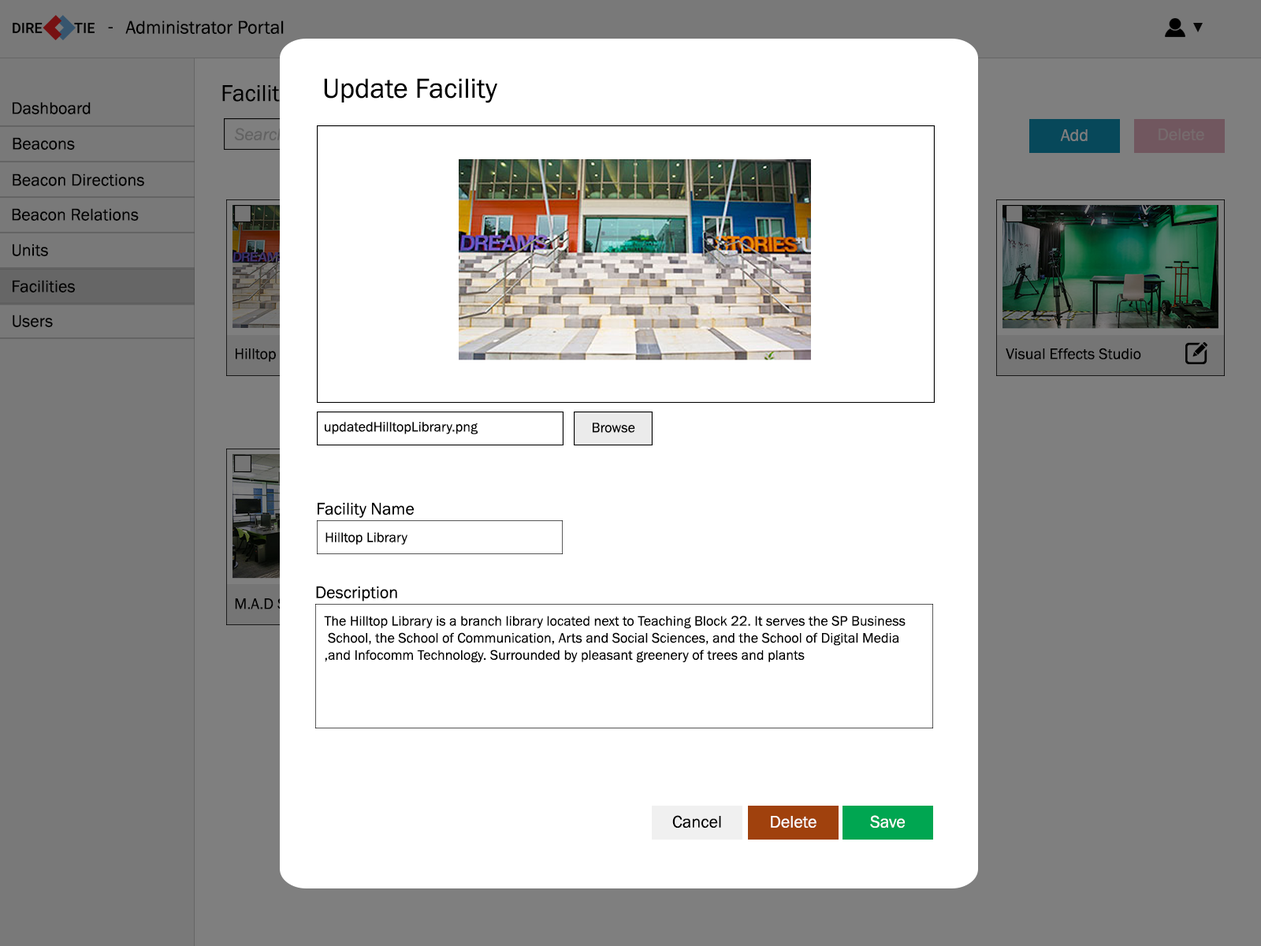
<style>
.page{position:relative;width:1261px;height:946px;background:#ffffff}
.page>*{position:absolute;margin:0}
.t1{font:18.9px "FranklinGothic-Book";color:#000000}
.t2{font:23.6px "FranklinGothic-Book";color:#000000}
.t3{font:28.4px "FranklinGothic-Book";color:#000000}
.t4{font:17.3px "FranklinGothic-Book";color:#000000}
.t5{font:17.3px "FranklinGothic-Book";color:#7f7f7f}
.t6{font:17.3px "FranklinGothic-Book";color:#766b6d}
.t7{font:15.7px "FranklinGothic-Book";color:#000000}
.t8{font:14.2px "FranklinGothic-Book";color:#000000}
.t9{font:17.3px "FranklinGothic-Book";color:#010101}
.t10{font:17.3px "FranklinGothic-Book";color:#fefefe}
</style>
<div class="page">
<p class="t1" style="left:108px;top:27px;width:5px;height:1px">-</p>
<p class="t1" style="left:125px;top:20px;width:159px;height:14px">Administrator Portal</p>
<p class="t2" style="left:222px;top:85px;width:86px;height:17px">Facilities</p>
<p class="t3" style="left:324px;top:78px;width:173px;height:25px">Update Facility</p>
<p class="t4" style="left:13px;top:102px;width:78px;height:12px">Dashboard</p>
<p class="t4" style="left:13px;top:137px;width:62px;height:13px">Beacons</p>
<p class="t5" style="left:1060px;top:129px;width:28px;height:12px">Add</p>
<p class="t6" style="left:1158px;top:128px;width:46px;height:12px">Delete</p>
<p class="t4" style="left:13px;top:173px;width:131px;height:13px">Beacon Directions</p>
<p class="t4" style="left:12px;top:208px;width:127px;height:13px">Beacon Relations</p>
<p class="t4" style="left:13px;top:244px;width:35px;height:12px">Units</p>
<p class="t4" style="left:13px;top:280px;width:62px;height:12px">Facilities</p>
<p class="t4" style="left:13px;top:314px;width:40px;height:13px">Users</p>
<p class="t7" style="left:1006px;top:348px;width:135px;height:11px">Visual Effects Studio</p>
<p class="t8" style="left:325px;top:422px;width:153px;height:12px">updatedHilltopLibrary.png</p>
<p class="t8" style="left:593px;top:422px;width:42px;height:11px">Browse</p>
<p class="t4" style="left:318px;top:502px;width:97px;height:16px">Facility Name</p>
<p class="t8" style="left:325px;top:532px;width:82px;height:13px">Hilltop Library</p>
<p class="t4" style="left:316px;top:586px;width:81px;height:15px">Description</p>
<p class="t8" style="left:324px;top:615px;width:581px;height:48px;text-align:right">The Hilltop Library is a branch library located next to Teaching Block 22. It serves the SP Business<br>School, the School of Communication, Arts and Social Sciences, and the School of Digital Media <br>and Infocomm Technology. Surrounded by pleasant greenery of trees and plants,</p>
<p class="t9" style="left:672px;top:815px;width:49px;height:12px">Cancel</p>
<p class="t10" style="left:771px;top:816px;width:45px;height:11px">Delete</p>
<p class="t10" style="left:870px;top:815px;width:35px;height:12px">Save</p>
</div>
